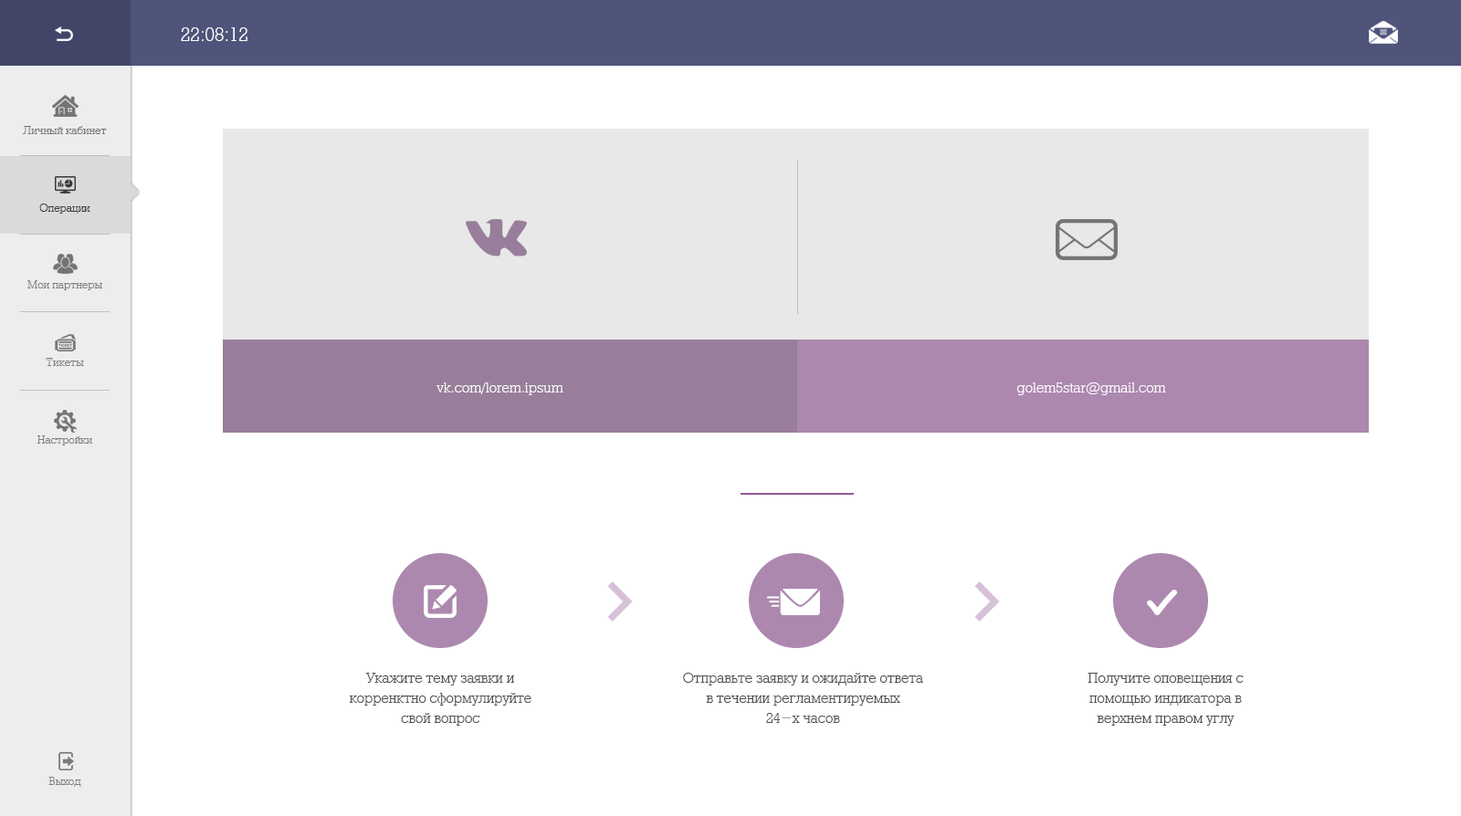
<style>
.page{position:relative;width:1461px;height:816px;background:#ffffff}
.page>*{position:absolute;margin:0}
.t1{font:21.9px "Rodeo95";color:#ffffff}
.t2{font:12.8px "Rodeo95";color:#747474}
.t3{font:12.8px "Rodeo95";color:#393939}
.t4{font:12.8px "Rodeo95";color:#7e7e7e}
.t5{font:16.4px "Rodeo95";color:#ffffff}
.t6{font:16.4px "Rodeo95";color:#505050}
</style>
<div class="page">
<p class="t1" style="left:181px;top:27px;width:66px;height:14px">22:08:12</p>
<p class="t2" style="left:22px;top:126px;width:85px;height:8px">Личный кабинет</p>
<p class="t3" style="left:39px;top:204px;width:51px;height:10px">Операции</p>
<p class="t4" style="left:27px;top:280px;width:75px;height:10px">Мои партнеры</p>
<p class="t4" style="left:46px;top:358px;width:38px;height:8px">Тикеты</p>
<p class="t5" style="left:436px;top:383px;width:127px;height:12px">vk.com/lorem.ipsum</p>
<p class="t5" style="left:1017px;top:383px;width:149px;height:12px">golem5star@gmail.com</p>
<p class="t4" style="left:37px;top:436px;width:55px;height:10px">Настройки</p>
<p class="t6" style="left:349px;top:673px;width:182px;height:53px;text-align:center">Укажите тему заявки и <br>корренктно сформулируйте свой вопрос</p>
<p class="t6" style="left:683px;top:673px;width:240px;height:50px;text-align:center">Отправьте заявку и ожидайте ответа в течении регламентируемых <br>24-х часов</p>
<p class="t6" style="left:1087px;top:673px;width:157px;height:53px;text-align:center">Получите оповещения с <br>помощью индикатора в <br>верхнем правом углу</p>
<p class="t4" style="left:48px;top:777px;width:33px;height:10px">Выход</p>
</div>
